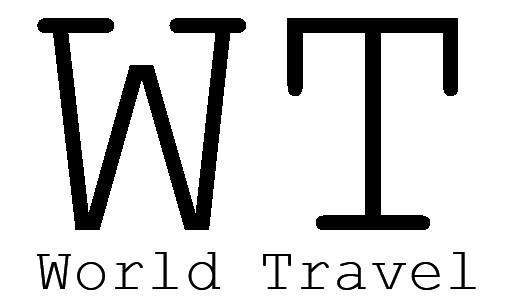
<style>
.page{position:relative;width:512px;height:305px;background:#ffffff}
.page>*{position:absolute;margin:0}
.t1{font:372px "CourierNewPSMT";letter-spacing:0.02em;color:#000000}
.t2{font:60px "CourierNewPSMT";letter-spacing:0.02em;color:#000000}
</style>
<div class="page">
<p class="t1" style="left:37px;top:18px;width:421px;height:212px">WT</p>
<p class="t2" style="left:36px;top:252px;width:440px;height:38px">World Travel</p>
</div>
